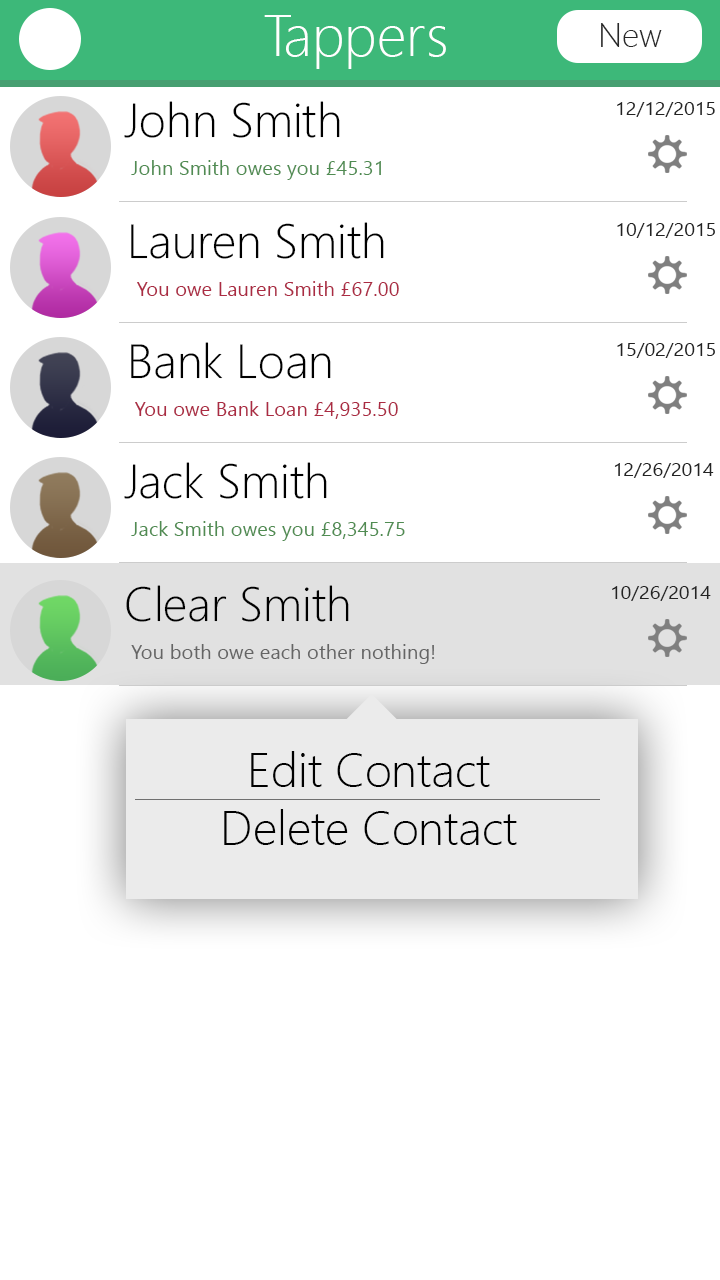
<style>
.page{position:relative;width:720px;height:1280px;background:#ffffff}
.page>*{position:absolute;margin:0}
.t1{font:58.2px "SegoeUI-Light";color:#ffffff}
.t2{font:33.9px "SegoeUI-Light";color:#282828}
.t3{font:48px "SegoeUI-Light";color:#000000}
.t4{font:19px "SegoeUI";color:#232323;scale:1.04 1}
.t5{font:20.2px "SegoeUI";color:#508c52}
.t6{font:20.2px "SegoeUI";color:#ab2b43}
.t7{font:20.2px "SegoeUI";color:#656565}
.t8{font:47.7px "SegoeUI-Light";color:#000000}
</style>
<div class="page">
<p class="t1" style="left:264px;top:15px;width:182px;height:54px">Tappers</p>
<p class="t2" style="left:601px;top:23px;width:61px;height:24px">New</p>
<p class="t3" style="left:124px;top:101px;width:216px;height:37px">John Smith</p>
<p class="t4" style="left:617px;top:102px;width:98px;height:15px">12/12/2015</p>
<p class="t5" style="left:131px;top:160px;width:250px;height:20px">John Smith owes you £45.31</p>
<p class="t3" style="left:131px;top:222px;width:253px;height:37px">Lauren Smith</p>
<p class="t4" style="left:617px;top:223px;width:98px;height:15px">10/12/2015</p>
<p class="t6" style="left:137px;top:281px;width:262px;height:15px">You owe Lauren Smith £67.00</p>
<p class="t3" style="left:131px;top:342px;width:200px;height:37px">Bank Loan</p>
<p class="t4" style="left:617px;top:343px;width:98px;height:15px">15/02/2015</p>
<p class="t6" style="left:135px;top:401px;width:263px;height:18px">You owe Bank Loan £4,935.50</p>
<p class="t3" style="left:124px;top:462px;width:203px;height:37px">Jack Smith</p>
<p class="t4" style="left:614px;top:463px;width:100px;height:15px">12/26/2014</p>
<p class="t5" style="left:131px;top:521px;width:274px;height:20px">Jack Smith owes you £8,345.75</p>
<p class="t3" style="left:126px;top:585px;width:223px;height:37px">Clear Smith</p>
<p class="t4" style="left:612px;top:586px;width:99px;height:15px">10/26/2014</p>
<p class="t7" style="left:131px;top:644px;width:304px;height:20px">You both owe each other nothing!</p>
<p class="t8" style="left:224px;top:751px;width:293px;height:94px;text-align:center">Edit Contact<br>Delete Contact</p>
</div>
